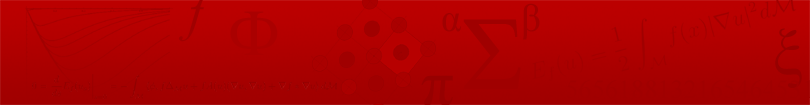
<style>
.page{position:relative;width:810px;height:105px}
.page>*{position:absolute;margin:0}
.t1{font:39.4px "TimesNewRomanPSMT";color:#a00000}
.t2{font:65.6px "TimesNewRomanPSMT";color:#aa0000}
.t3{font:105px "TimesNewRomanPSMT";color:#a00000}
.t4{font:65.6px "TimesNewRomanPSMT";color:#970000}
</style>
<div class="page">
<p class="t1" style="left:442px;top:3px;width:98px;height:37px">α      β</p>
<p class="t2" style="left:230px;top:11px;width:48px;height:44px">Ф</p>
<p class="t3" style="left:463px;top:19px;width:58px;height:70px">Σ</p>
<p class="t4" style="left:775px;top:28px;width:27px;height:60px">ξ</p>
<p class="t4" style="left:421px;top:75px;width:32px;height:31px">π</p>
</div>
